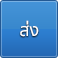
<style>
.page{position:relative;width:58px;height:58px}
.page>*{position:absolute;margin:0}
.t1{font:18px "NotoSansThai-Regular";color:#ffffff}
</style>
<div class="page">
<p class="t1" style="left:20px;top:20px;width:19px;height:17px">ส่ง</p>
</div>
